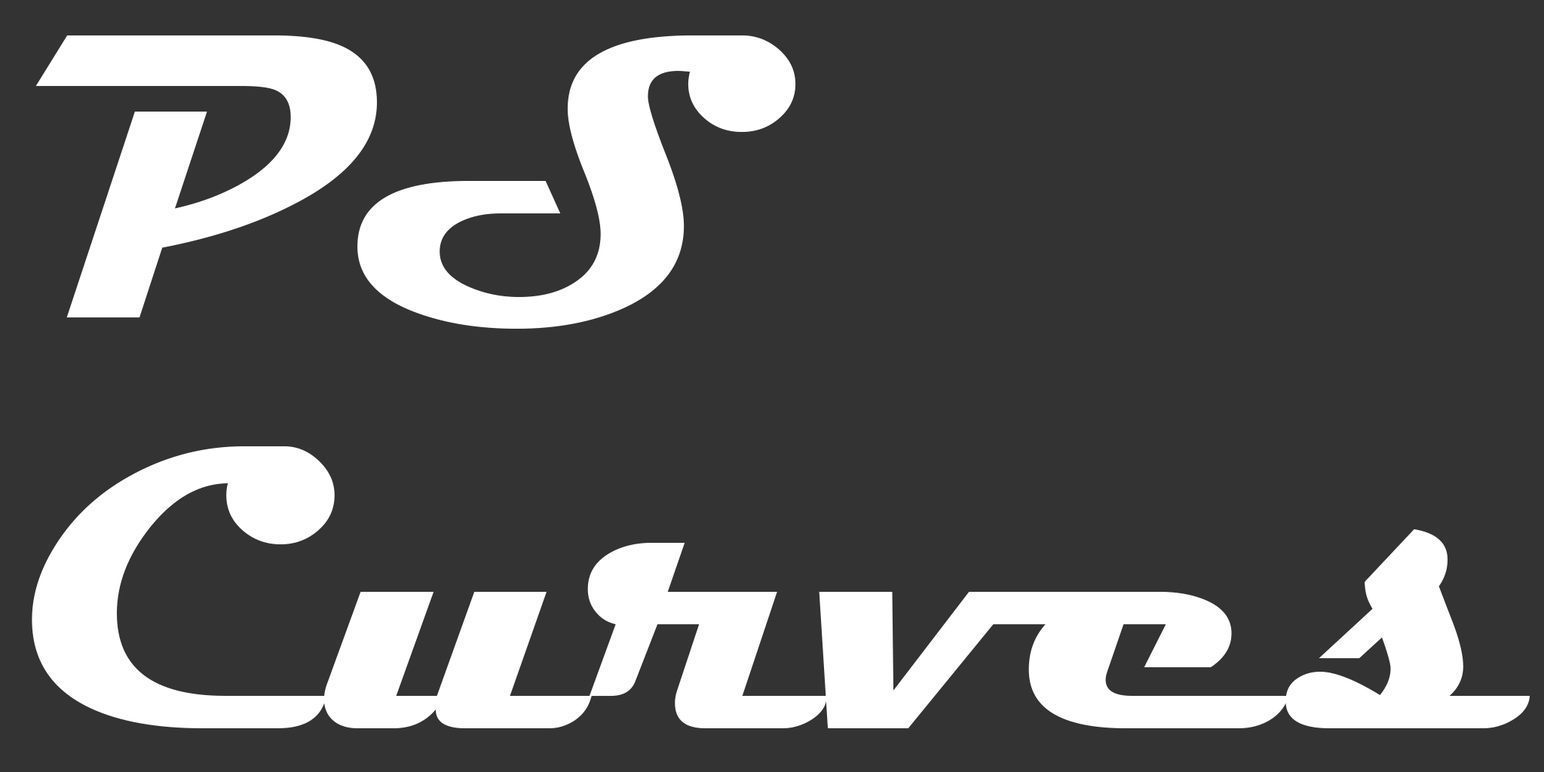
<style>
.page{position:relative;width:1544px;height:772px;background:#333333}
.page>*{position:absolute;margin:0}
.t1{font:411.3px/411.3px "Magneto-Bold";color:#ffffff}
</style>
<div class="page">
<p class="t1" style="left:32px;top:35px;width:1499px;height:693px">PS<br>Curves</p>
</div>
